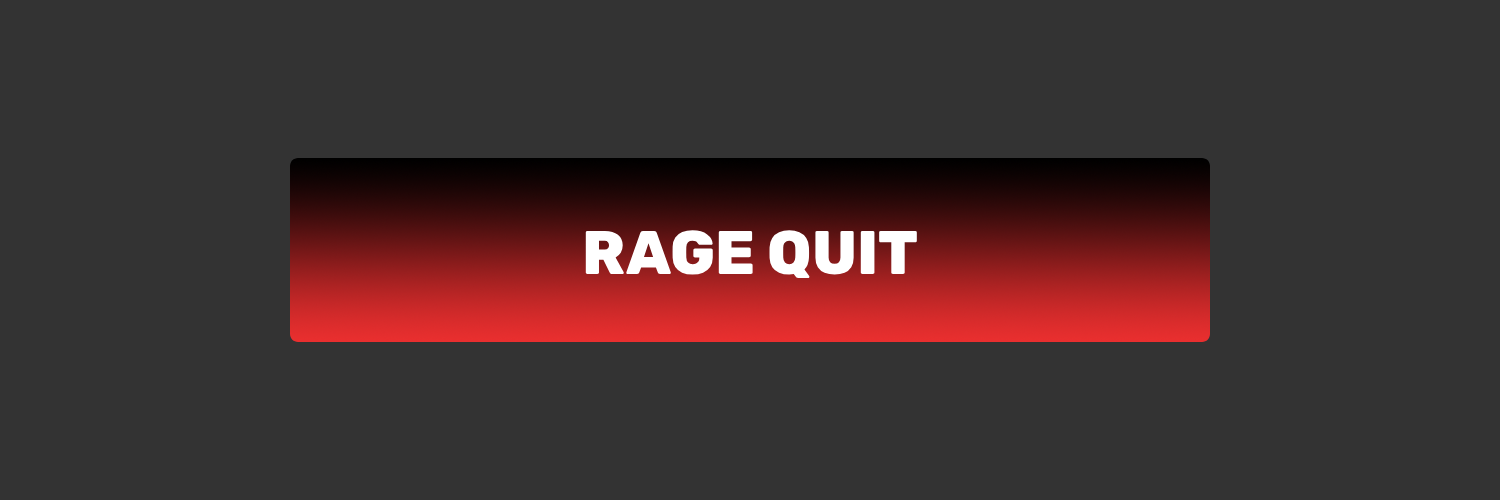
<style>
.page{position:relative;width:1500px;height:500px;background:#333333}
.page>*{position:absolute;margin:0}
.t1{font:61.6px "Rubik-ExtraBold";color:#ffffff}
</style>
<div class="page">
<p class="t1" style="left:585px;top:230px;width:332px;height:48px">RAGE QUIT</p>
</div>
